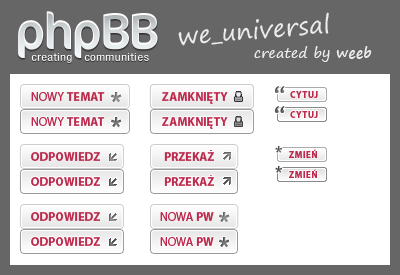
<style>
.page{position:relative;width:400px;height:275px;background:#ffffff}
.page>*{position:absolute;margin:0}
.t1{font:24px "SegoePrint";letter-spacing:0.01em;color:#ececec}
.t2{font:14px "SegoePrint";letter-spacing:0.01em;color:#ececec}
.t3{font:14px "SegoePrint-Bold";letter-spacing:0.01em;color:#ececec}
.t4{font:12px "MyriadPro-Bold";letter-spacing:0.01em;color:#bc2a4d}
.t5{font:12px "MyriadPro-Regular";letter-spacing:0.008em;color:#bc2a4d}
.t6{font:9px "MyriadPro-Bold";letter-spacing:0.05em;color:#bc2a4d;text-transform:uppercase}
.t7{font:12px "MyriadPro-Bold";letter-spacing:0.008em;color:#bc2a4d}
.t8{font:29px "HelveticaNeueLTStd-Bd"}
</style>
<div class="page">
<p class="t1" style="left:178px;top:12px;width:151px;height:34px;rotate:-5deg">we_universal</p>
<p class="t2" style="left:254px;top:46px;width:118px;height:16px">created by <span class="t3">weeb</span></p>
<p class="t4" style="left:31px;top:92px;width:74px;height:9px"><span class="t5">NOWY </span>TEMAT</p>
<p class="t4" style="left:162px;top:92px;width:66px;height:12px">ZAMKNIĘTY</p>
<p class="t6" style="left:290px;top:91px;width:28px;height:7px">CYTUJ</p>
<p class="t6" style="left:290px;top:111px;width:28px;height:7px">CYTUJ</p>
<p class="t4" style="left:31px;top:117px;width:74px;height:9px"><span class="t5">NOWY </span>TEMAT</p>
<p class="t4" style="left:162px;top:117px;width:66px;height:12px">ZAMKNIĘTY</p>
<p class="t4" style="left:31px;top:152px;width:69px;height:9px">ODPOWIEDZ</p>
<p class="t4" style="left:164px;top:152px;width:50px;height:9px">PRZEKAZ</p>
<p class="t4" style="left:31px;top:177px;width:69px;height:9px">ODPOWIEDZ</p>
<p class="t4" style="left:164px;top:177px;width:50px;height:9px">PRZEKAZ</p>
<p class="t4" style="left:31px;top:212px;width:69px;height:9px">ODPOWIEDZ</p>
<p class="t5" style="left:160px;top:212px;width:54px;height:9px">NOWA <span class="t7">PW</span></p>
<p class="t4" style="left:31px;top:237px;width:69px;height:9px">ODPOWIEDZ</p>
<p class="t5" style="left:160px;top:237px;width:54px;height:9px">NOWA <span class="t7">PW</span></p>
<p class="t8" style="left:219px;top:237px;width:11px;height:11px">*</p>
</div>
